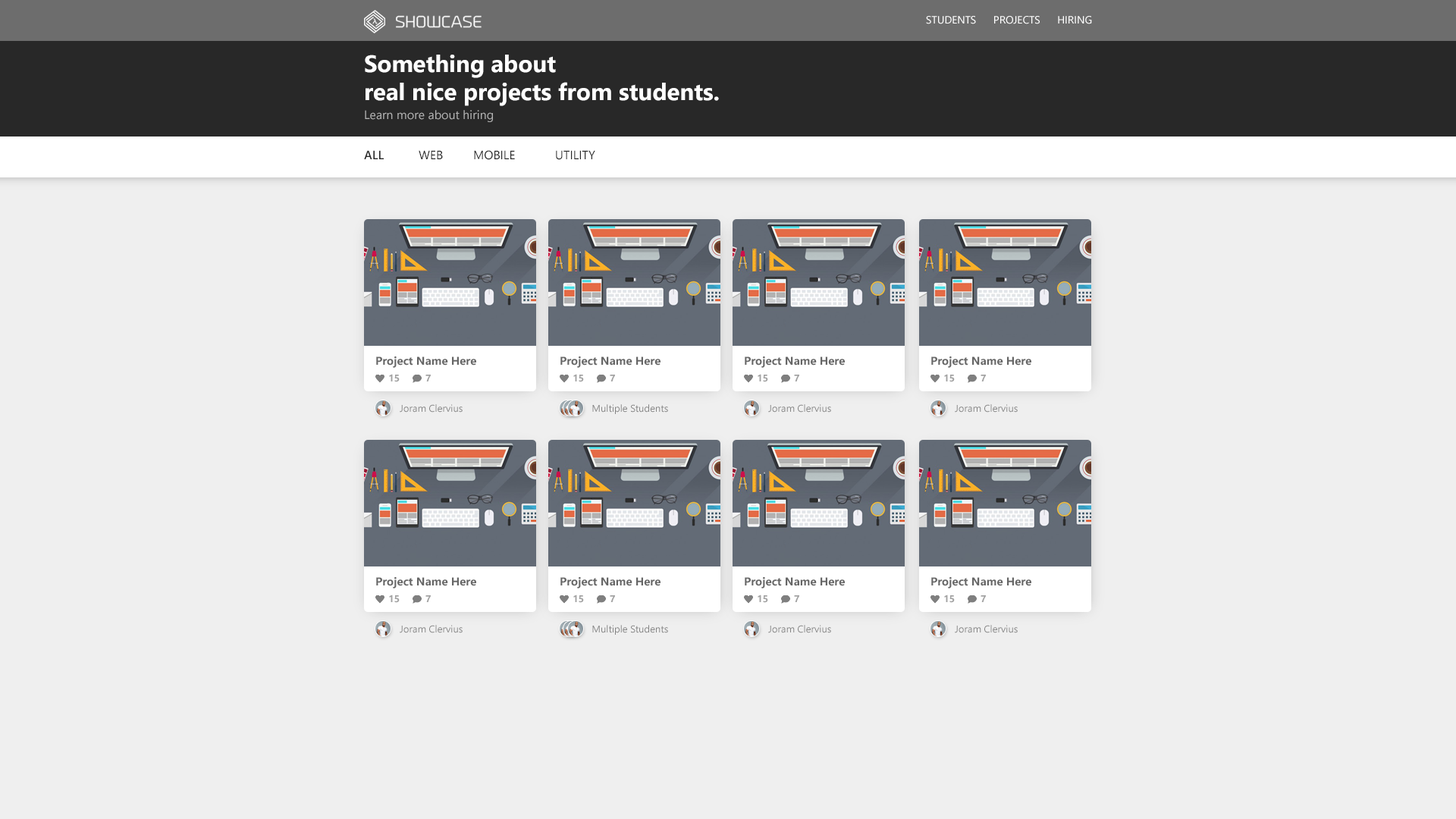
<style>
.page{position:relative;width:1456px;height:819px;background:#efefef}
.page>*{position:absolute;margin:0}
.t1{font:10.6px "SegoeUI";color:#ffffff;text-transform:uppercase}
.t2{font:23.5px "SegoeUI-Bold";color:#ffffff}
.t3{font:12.1px/19px "SegoeUI";color:#b2b2b2}
.t4{font:12.1px "SegoeUI";color:#282828;text-transform:uppercase}
.t5{font:12.1px "SegoeUI-Semibold";color:#282828;text-transform:uppercase}
.t6{font:11.4px "SegoeUI-Bold";color:#676767}
.t7{font:9.6px "SegoeUI-Bold";color:#a1a1a1;text-transform:uppercase}
.t8{font:9.9px "SegoeUI";color:#838383}
</style>
<div class="page">
<p class="t1" style="left:926px;top:16px;width:166px;height:8px">Students Projects Hiring</p>
<p class="t2" style="left:365px;top:55px;width:354px;height:67px">Something about<br>real nice projects from students.<br><span class="t3">Learn more about hiring</span></p>
<p class="t4" style="left:364px;top:150px;width:231px;height:10px"><span class="t5">all</span>  web  mobile  utility</p>
<p class="t6" style="left:376px;top:356px;width:100px;height:12px">Project Name Here</p>
<p class="t6" style="left:560px;top:356px;width:100px;height:12px">Project Name Here</p>
<p class="t6" style="left:745px;top:356px;width:100px;height:12px">Project Name Here</p>
<p class="t6" style="left:931px;top:356px;width:100px;height:12px">Project Name Here</p>
<p class="t7" style="left:389px;top:374px;width:11px;height:8px">15</p>
<p class="t7" style="left:425px;top:375px;width:6px;height:6px">7</p>
<p class="t7" style="left:573px;top:374px;width:11px;height:8px">15</p>
<p class="t7" style="left:610px;top:375px;width:5px;height:6px">7</p>
<p class="t7" style="left:758px;top:374px;width:10px;height:8px">15</p>
<p class="t7" style="left:794px;top:375px;width:5px;height:6px">7</p>
<p class="t7" style="left:944px;top:374px;width:11px;height:8px">15</p>
<p class="t7" style="left:981px;top:375px;width:5px;height:6px">7</p>
<p class="t8" style="left:400px;top:404px;width:63px;height:9px">Joram Clervius</p>
<p class="t8" style="left:592px;top:404px;width:76px;height:10px">Multiple Students</p>
<p class="t8" style="left:768px;top:404px;width:63px;height:9px">Joram Clervius</p>
<p class="t8" style="left:955px;top:404px;width:63px;height:9px">Joram Clervius</p>
<p class="t6" style="left:376px;top:577px;width:100px;height:11px">Project Name Here</p>
<p class="t6" style="left:560px;top:577px;width:100px;height:11px">Project Name Here</p>
<p class="t6" style="left:745px;top:577px;width:100px;height:11px">Project Name Here</p>
<p class="t6" style="left:931px;top:577px;width:100px;height:11px">Project Name Here</p>
<p class="t7" style="left:389px;top:595px;width:11px;height:8px">15</p>
<p class="t7" style="left:425px;top:595px;width:6px;height:7px">7</p>
<p class="t7" style="left:573px;top:595px;width:11px;height:8px">15</p>
<p class="t7" style="left:610px;top:595px;width:5px;height:7px">7</p>
<p class="t7" style="left:758px;top:595px;width:10px;height:8px">15</p>
<p class="t7" style="left:794px;top:595px;width:5px;height:7px">7</p>
<p class="t7" style="left:944px;top:595px;width:11px;height:8px">15</p>
<p class="t7" style="left:981px;top:595px;width:5px;height:7px">7</p>
<p class="t8" style="left:400px;top:625px;width:63px;height:8px">Joram Clervius</p>
<p class="t8" style="left:592px;top:625px;width:76px;height:10px">Multiple Students</p>
<p class="t8" style="left:768px;top:625px;width:63px;height:8px">Joram Clervius</p>
<p class="t8" style="left:955px;top:625px;width:63px;height:8px">Joram Clervius</p>
</div>
